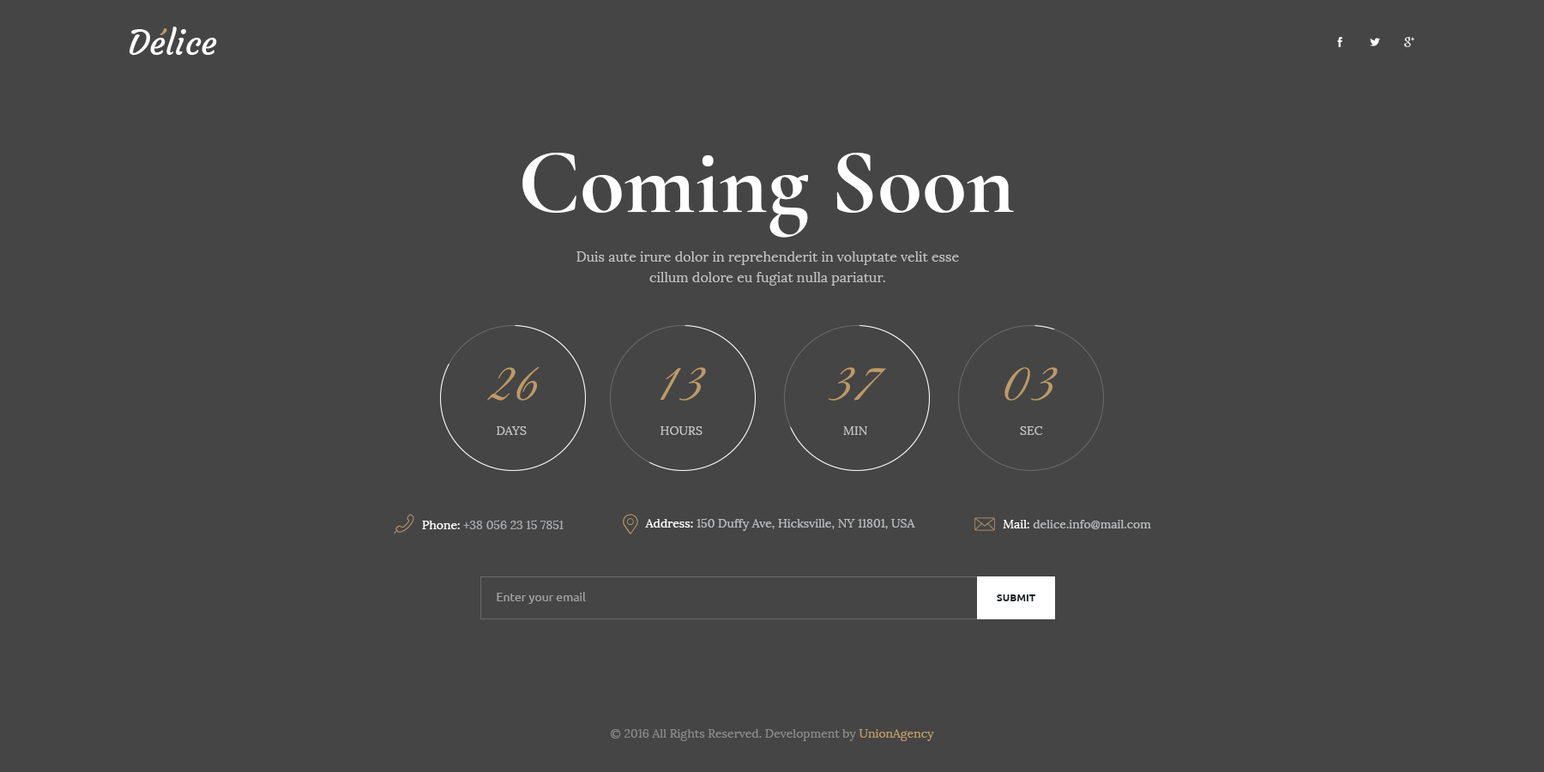
<style>
.page{position:relative;width:1544px;height:772px;background:#454545}
.page>*{position:absolute;margin:0}
.t1{font:34.3px "Courgette-Regular";color:#ffffff}
.t2{font:91.3px "CormorantGaramond-Bold";color:#ffffff}
.t3{font:13.7px/20.6px "Lora-Regular";color:#c3c3c3}
.t4{font:55.8px "GreatVibes-Regular";color:#be9a67}
.t5{font:12px "Lora-Regular";color:#c3c3c3;text-transform:uppercase}
.t6{font:12px "Lora-Regular";color:#a9abad}
.t7{font:12px "Lora-Regular";color:#ffffff}
.t8{font:12px "Lora-Regular";color:#b9bbbd}
.t9{font:12px "Ubuntu";color:#a0a0a0}
.t10{font:10.3px "Ubuntu-Bold";color:#1b2228;text-transform:uppercase}
.t11{font:12px "Lora-Regular";color:#898989}
.t12{font:12px "Lora-Regular";color:#be9a67}
</style>
<div class="page">
<p class="t1" style="left:129px;top:27px;width:88px;height:28px">Delice</p>
<p class="t2" style="left:522px;top:153px;width:492px;height:85px">Coming Soon</p>
<p class="t3" style="left:577px;top:251px;width:382px;height:35px;text-align:center">Duis aute irure dolor in reprehenderit in voluptate velit esse<br>cillum dolore eu fugiat nulla pariatur.</p>
<p class="t4" style="left:487px;top:366px;width:53px;height:35px">26</p>
<p class="t4" style="left:661px;top:367px;width:45px;height:34px">13</p>
<p class="t4" style="left:828px;top:367px;width:58px;height:34px">37</p>
<p class="t4" style="left:1005px;top:367px;width:53px;height:34px">03</p>
<p class="t5" style="left:497px;top:426px;width:30px;height:9px">days</p>
<p class="t5" style="left:661px;top:426px;width:42px;height:9px">hours</p>
<p class="t5" style="left:843px;top:426px;width:24px;height:9px">min</p>
<p class="t5" style="left:1020px;top:426px;width:23px;height:9px">sec</p>
<p class="t6" style="left:422px;top:520px;width:142px;height:9px"><span class="t7">Phone: </span>+38 056 23 15 7851</p>
<p class="t8" style="left:645px;top:518px;width:270px;height:13px"><span class="t7">Address: </span>150 Duffy Ave, Hicksville, NY 11801, USA</p>
<p class="t8" style="left:1003px;top:520px;width:148px;height:9px"><span class="t7">Mail:</span> delice.info@mail.com</p>
<p class="t9" style="left:497px;top:592px;width:89px;height:12px">Enter your email</p>
<p class="t10" style="left:997px;top:595px;width:39px;height:6px">Submit</p>
<p class="t11" style="left:611px;top:729px;width:323px;height:12px">© 2016 All Rights Reserved. Development by <span class="t12">UnionAgency</span></p>
</div>
